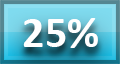
<style>
.page{position:relative;width:120px;height:64px}
.page>*{position:absolute;margin:0}
.t1{font:44.4px "Calibri-Bold";color:#ffffff}
</style>
<div class="page">
<p class="t1" style="left:23px;top:18px;width:75px;height:30px">25%</p>
</div>
